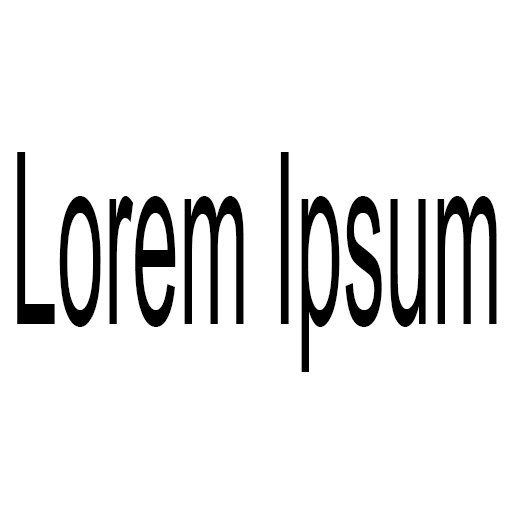
<style>
.page{position:relative;width:512px;height:512px;background:#ffffff}
.page>*{position:absolute;margin:0}
.t1{font:240.3px "ArialMT";color:#000000;scale:0.35 1}
</style>
<div class="page">
<p class="t1" style="left:17px;top:152px;width:480px;height:220px">Lorem Ipsum</p>
</div>
